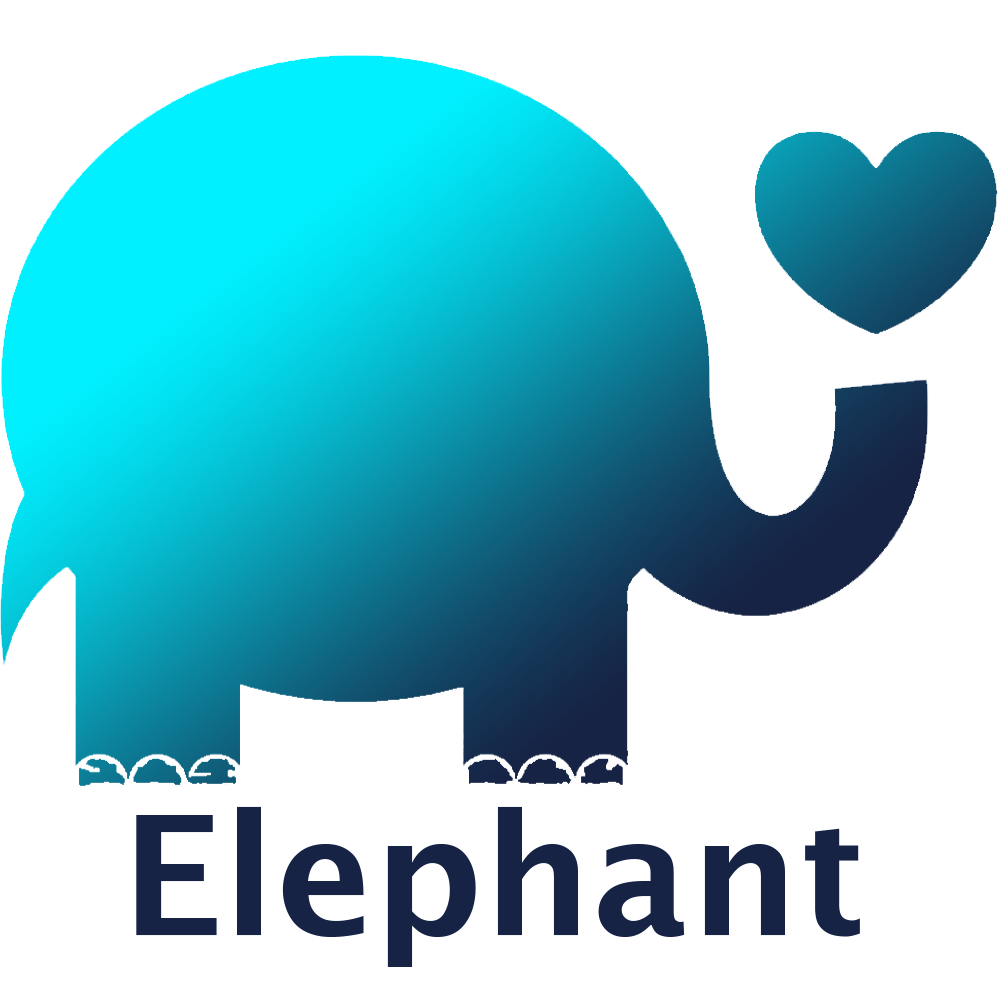
<style>
.page{position:relative;width:1000px;height:1000px;background:#ffffff}
.page>*{position:absolute;margin:0}
.t1{font:165.8px "LucidaSans-Demi";color:#162345}
</style>
<div class="page">
<p class="t1" style="left:136px;top:806px;width:724px;height:161px">Elephant</p>
</div>
